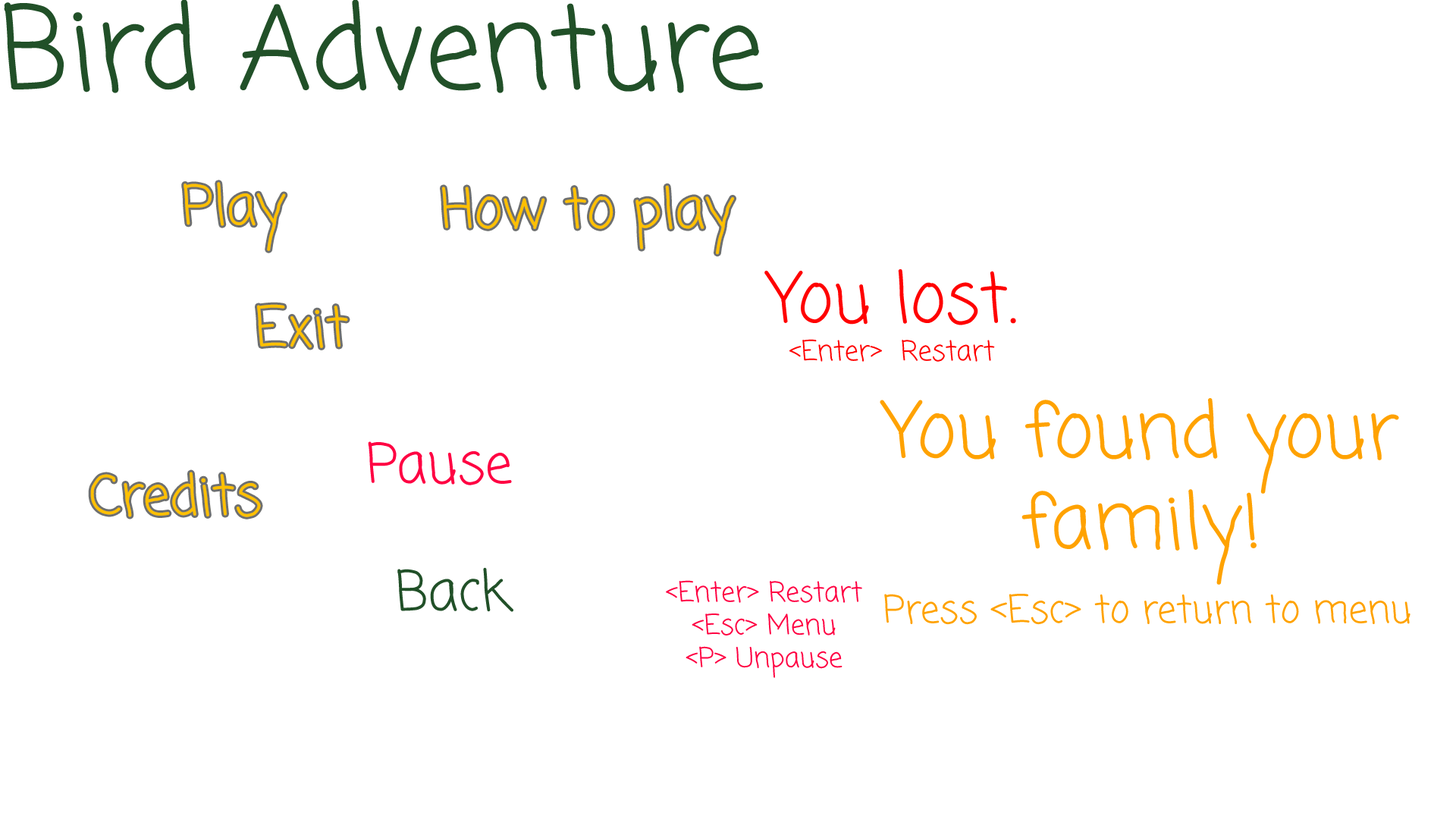
<style>
.page{position:relative;width:1456px;height:819px;background:#ffffff}
.page>*{position:absolute;margin:0}
.t1{font:113.7px "ComingSoon-Regular";color:#215028}
.t2{font:54.6px "ComingSoon-Regular";color:#ffc000}
.t3{font:68.2px "ComingSoon-Regular";color:#ff0000}
.t4{font:27.3px "ComingSoon-Regular";color:#ff0000}
.t5{font:75.8px "ComingSoon-Regular";color:#ffa200}
.t6{font:54.6px "ComingSoon-Regular";color:#ff0042}
.t7{font:54.6px "ComingSoon-Regular";color:#215028}
.t8{font:27.3px "ComingSoon-Regular";color:#ff0042}
.t9{font:37.9px "ComingSoon-Regular";color:#ffa200}
</style>
<div class="page">
<p class="t1" style="left:4px;top:0px;width:759px;height:93px">Bird Adventure</p>
<p class="t2" style="left:184px;top:182px;width:102px;height:69px">Play</p>
<p class="t2" style="left:442px;top:185px;width:292px;height:70px">How to play</p>
<p class="t3" style="left:764px;top:269px;width:252px;height:56px">You lost.</p>
<p class="t2" style="left:257px;top:304px;width:91px;height:44px">Exit</p>
<p class="t4" style="left:789px;top:339px;width:206px;height:23px">&lt;Enter&gt;  Restart</p>
<p class="t5" style="left:880px;top:398px;width:519px;height:187px;text-align:center">You found your family!</p>
<p class="t6" style="left:368px;top:441px;width:144px;height:44px">Pause</p>
<p class="t2" style="left:90px;top:472px;width:171px;height:45px">Credits</p>
<p class="t7" style="left:397px;top:567px;width:116px;height:45px">Back</p>
<p class="t8" style="left:666px;top:580px;width:196px;height:98px;text-align:center">&lt;Enter&gt; Restart<br>&lt;Esc&gt; Menu<br>&lt;P&gt; Unpause</p>
<p class="t9" style="left:884px;top:594px;width:526px;height:31px">Press &lt;Esc&gt; to return to menu</p>
</div>
